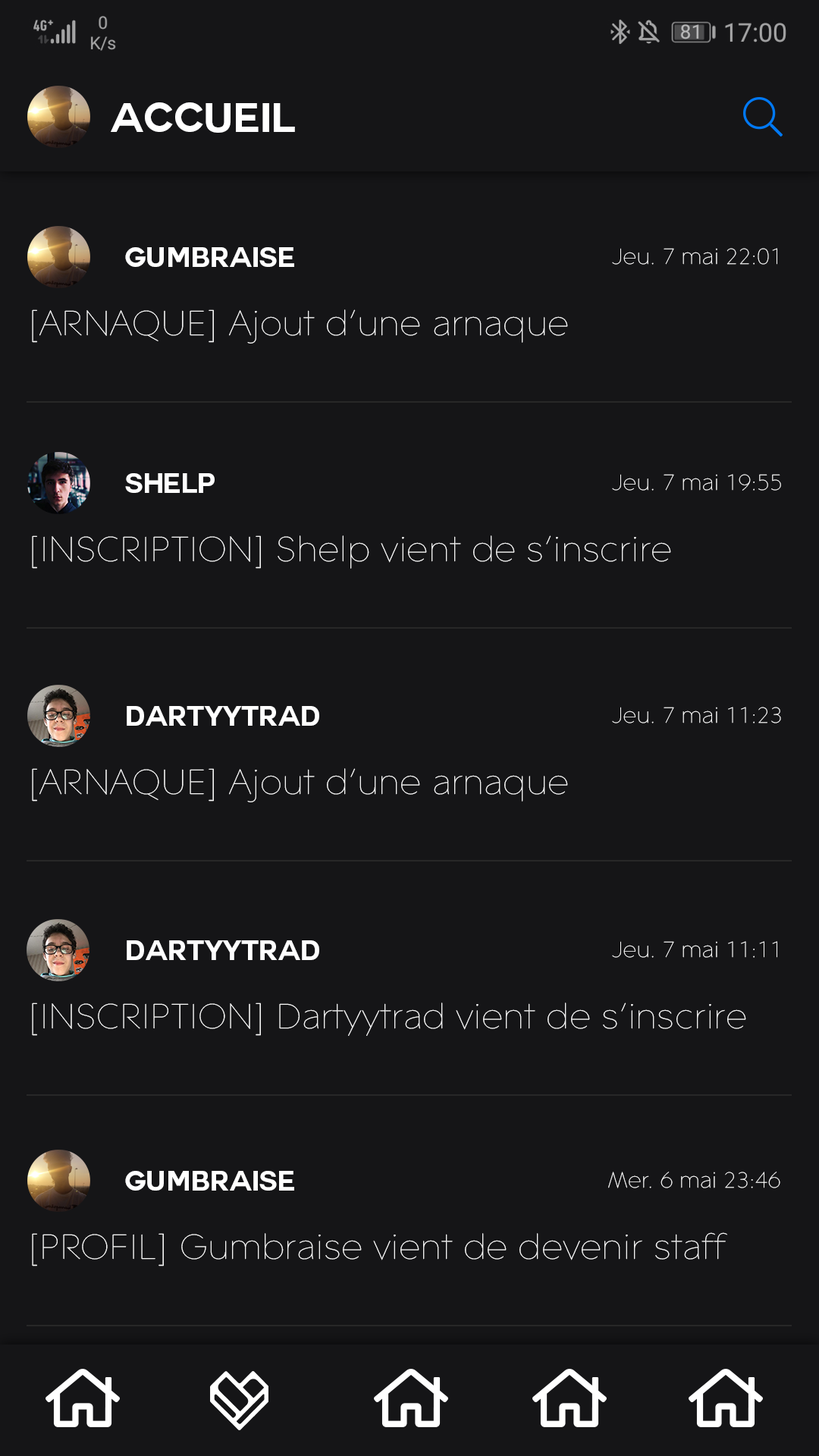
<style>
.page{position:relative;width:819px;height:1456px;background:#151517}
.page>*{position:absolute;margin:0}
.t1{font:40.5px "Couture-Bold";color:#ffffff}
.t2{font:27.3px "Couture-Bold";color:#ffffff}
.t3{font:22.7px "ContaxW01-25UltraLight";color:#ffffff}
.t4{font:36.4px "ContaxW01-25UltraLight";color:#ffffff}
</style>
<div class="page">
<p class="t1" style="left:111px;top:102px;width:184px;height:31px">ACCUEIL</p>
<p class="t2" style="left:125px;top:247px;width:169px;height:20px">Gumbraise</p>
<p class="t3" style="left:612px;top:248px;width:165px;height:17px">Jeu. 7 mai 22:01</p>
<p class="t4" style="left:32px;top:309px;width:536px;height:35px">[ARNAQUE] Ajout d’une arnaque</p>
<p class="t2" style="left:125px;top:473px;width:90px;height:20px">SHELP</p>
<p class="t3" style="left:612px;top:474px;width:169px;height:17px">Jeu. 7 mai 19:55</p>
<p class="t4" style="left:32px;top:535px;width:639px;height:34px">[INSCRIPTION] Shelp vient de s’inscrire</p>
<p class="t2" style="left:127px;top:706px;width:192px;height:20px">DARTYYTRAD</p>
<p class="t3" style="left:612px;top:707px;width:169px;height:16px">Jeu. 7 mai 11:23</p>
<p class="t4" style="left:32px;top:768px;width:536px;height:34px">[ARNAQUE] Ajout d’une arnaque</p>
<p class="t2" style="left:127px;top:940px;width:192px;height:20px">DARTYYTRAD</p>
<p class="t3" style="left:612px;top:941px;width:165px;height:17px">Jeu. 7 mai 11:11</p>
<p class="t4" style="left:32px;top:1003px;width:714px;height:33px">[INSCRIPTION] Dartyytrad vient de s’inscrire</p>
<p class="t2" style="left:125px;top:1171px;width:169px;height:20px">Gumbraise</p>
<p class="t3" style="left:608px;top:1172px;width:172px;height:16px">Mer. 6 mai 23:46</p>
<p class="t4" style="left:32px;top:1232px;width:695px;height:34px">[PROFIL] Gumbraise vient de devenir staff</p>
</div>
